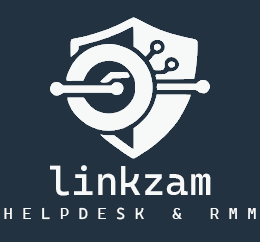
<style>
.page{position:relative;width:260px;height:242px;background:#233240}
.page>*{position:absolute;margin:0}
.t1{font:40px "CascadiaMono-Regular";color:#f7f8f8}
.t2{font:16px "CascadiaMono-Regular";color:#f7f8f8}
</style>
<div class="page">
<p class="t1" style="left:50px;top:165px;width:161px;height:31px">linkzam</p>
<p class="t2" style="left:4px;top:207px;width:252px;height:13px">H E L P D E S K   &amp;   R M M</p>
</div>
